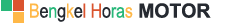
<style>
.page{position:relative;width:227px;height:24px;background:#ffffff}
.page>*{position:absolute;margin:0}
.t1{font:19.5px "Arial-BoldMT";letter-spacing:-0.005em;color:#262a31}
.t2{font:19.5px "ArialNarrow";letter-spacing:-0.005em;color:#ffb848}
.t3{font:19.5px "ArialNarrow";letter-spacing:-0.005em;color:#262a31}
.t4{font:19.5px "ArialNarrow";letter-spacing:-0.005em;color:#28b779}
.t5{font:19.5px "ArialNarrow";letter-spacing:-0.005em;color:#da542e}
</style>
<div class="page">
<p class="t1" style="left:30px;top:3px;width:181px;height:19px"><span class="t2">B</span><span class="t3">e</span><span class="t4">n</span><span class="t3">g</span><span class="t2">k</span><span class="t3">e</span><span class="t5">l H</span><span class="t3">o</span><span class="t4">ra</span><span class="t2">s </span>MOTOR</p>
</div>
